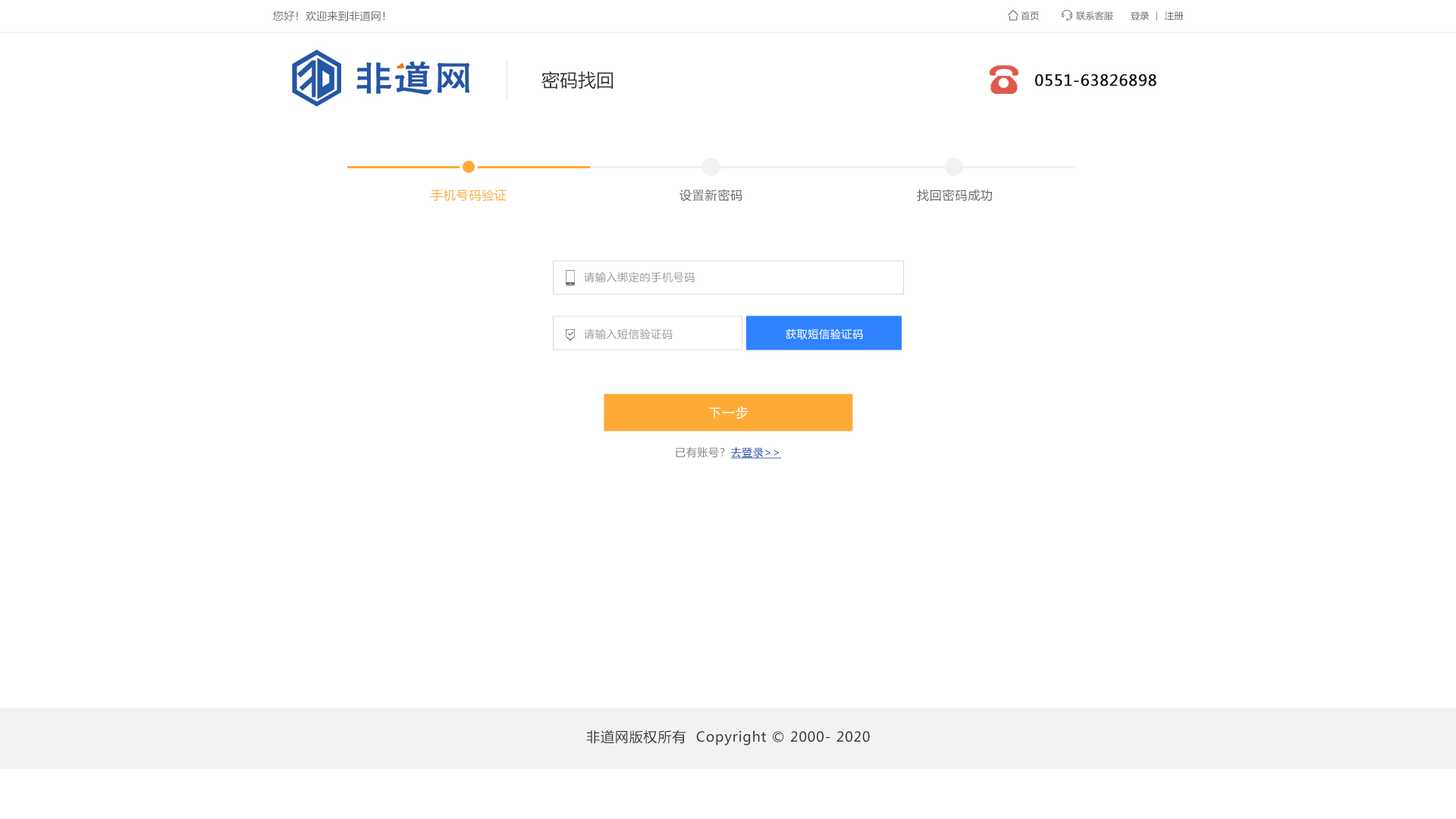
<style>
.page{position:relative;width:1456px;height:819px;background:#ffffff}
.page>*{position:absolute;margin:0}
.t1{font:10.6px "MicrosoftYaHei";letter-spacing:0.022em;color:#666666}
.t2{font:9.1px "MicrosoftYaHei";letter-spacing:0.022em;color:#666666}
.t3{font:18.2px "MicrosoftYaHei";color:#333333}
.t4{font:15.2px "MicrosoftYaHei";letter-spacing:0.022em;color:#121212;font-weight:bold}
.t5{font:12.1px "MicrosoftYaHei";letter-spacing:0.05em;color:#feab36}
.t6{font:12.1px "MicrosoftYaHei";letter-spacing:0.05em;color:#666666}
.t7{font:10.6px "MicrosoftYaHei";letter-spacing:0.05em;color:#999999}
.t8{font:10.6px "MicrosoftYaHei";letter-spacing:0.05em;color:#ffffff}
.t9{font:13.5px "AdobeHeitiStd-Regular";color:#ffffff}
.t10{font:10.6px "MicrosoftYaHei";letter-spacing:0.05em;color:#7f7f7f}
.t11{font:10.6px "MicrosoftYaHei";letter-spacing:0.05em;color:#13489e;text-decoration:underline}
.t12{font:13.6px "MicrosoftYaHei";letter-spacing:0.05em;color:#333333}
</style>
<div class="page">
<p class="t1" style="left:273px;top:11px;width:112px;height:10px">您好！欢迎来到非道网！</p>
<p class="t2" style="left:1021px;top:11px;width:18px;height:9px">首页</p>
<p class="t2" style="left:1076px;top:11px;width:37px;height:9px">联系客服</p>
<p class="t2" style="left:1131px;top:11px;width:18px;height:9px">登录</p>
<p class="t2" style="left:1165px;top:11px;width:19px;height:9px">注册</p>
<p class="t3" style="left:541px;top:71px;width:72px;height:18px">密码找回</p>
<p class="t4" style="left:1035px;top:74px;width:121px;height:12px">0551-63826898</p>
<p class="t5" style="left:431px;top:189px;width:76px;height:13px">手机号码验证</p>
<p class="t6" style="left:679px;top:189px;width:63px;height:13px">设置新密码</p>
<p class="t6" style="left:917px;top:189px;width:75px;height:12px">找回密码成功</p>
<p class="t7" style="left:584px;top:271px;width:111px;height:12px">请输入绑定的手机号码</p>
<p class="t7" style="left:584px;top:328px;width:89px;height:12px">请输入短信验证码</p>
<p class="t8" style="left:786px;top:328px;width:77px;height:12px">获取短信验证码</p>
<p class="t9" style="left:709px;top:406px;width:39px;height:13px">下一步</p>
<p class="t10" style="left:676px;top:447px;width:105px;height:12px">已有账号？<span class="t11">去登录&gt;&gt;</span></p>
<p class="t12" style="left:586px;top:730px;width:284px;height:15px">非道网版权所有  Copyright © 2000- 2020</p>
</div>
